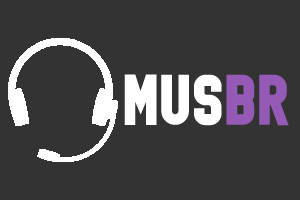
<style>
.page{position:relative;width:300px;height:200px;background:#333333}
.page>*{position:absolute;margin:0}
.t1{font:72px "LanterosySansSerif";letter-spacing:0.025em;color:#ffffff}
.t2{font:72px "LanterosySansSerif";letter-spacing:0.025em;color:#945ab5}
</style>
<div class="page">
<p class="t1" style="left:124px;top:74px;width:165px;height:52px">MUS<span class="t2">BR</span></p>
</div>
